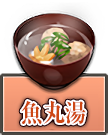
<style>
.page{position:relative;width:108px;height:135px}
.page>*{position:absolute;margin:0}
.t1{font:25px "RyuminPr6N-ExBold";color:#cd4714;scale:0.9 1}
</style>
<div class="page">
<p class="t1" style="left:21px;top:100px;width:65px;height:24px">魚丸湯</p>
</div>
